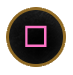
<style>
.page{position:relative;width:73px;height:75px;background:#ffffff}
.page>*{position:absolute;margin:0}
.t1{font:55px "Montserrat-Regular";color:#ff75c7}
</style>
<div class="page">
<p class="t1" style="left:25px;top:25px;width:22px;height:23px">□</p>
</div>
